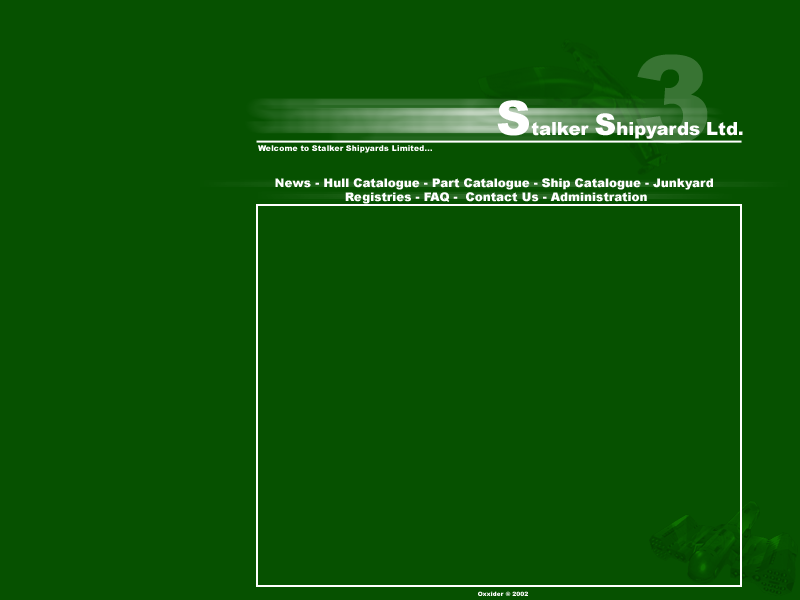
<style>
.page{position:relative;width:800px;height:600px;background:#065100}
.page>*{position:absolute;margin:0}
.t1{font:120px "Arial-Black";color:#387433}
.t2{font:18px "Arial-Black";color:#ffffff}
.t3{font:48px "Arial-Black";color:#ffffff}
.t4{font:30px "Arial-Black";color:#ffffff}
.t5{font:8px "Arial-Black";color:#ffffff}
.t6{font:12px "Arial-Black";color:#ffffff}
.t7{font:6px "Arial-Black";color:#ffffff}
</style>
<div class="page">
<p class="t1" style="left:636px;top:54px;width:72px;height:90px">3</p>
<p class="t2" style="left:497px;top:100px;width:246px;height:39px"><span class="t3">S</span>talker <span class="t4">S</span>hipyards Ltd.</p>
<p class="t5" style="left:258px;top:145px;width:174px;height:8px">Welcome to Stalker Shipyards Limited...</p>
<p class="t6" style="left:275px;top:178px;width:438px;height:26px;text-align:center">News - Hull Catalogue - Part Catalogue - Ship Catalogue - Junkyard <br> Registries - FAQ -  Contact Us - Administration</p>
<p class="t7" style="left:478px;top:591px;width:50px;height:5px">Oxxider © 2002</p>
</div>
